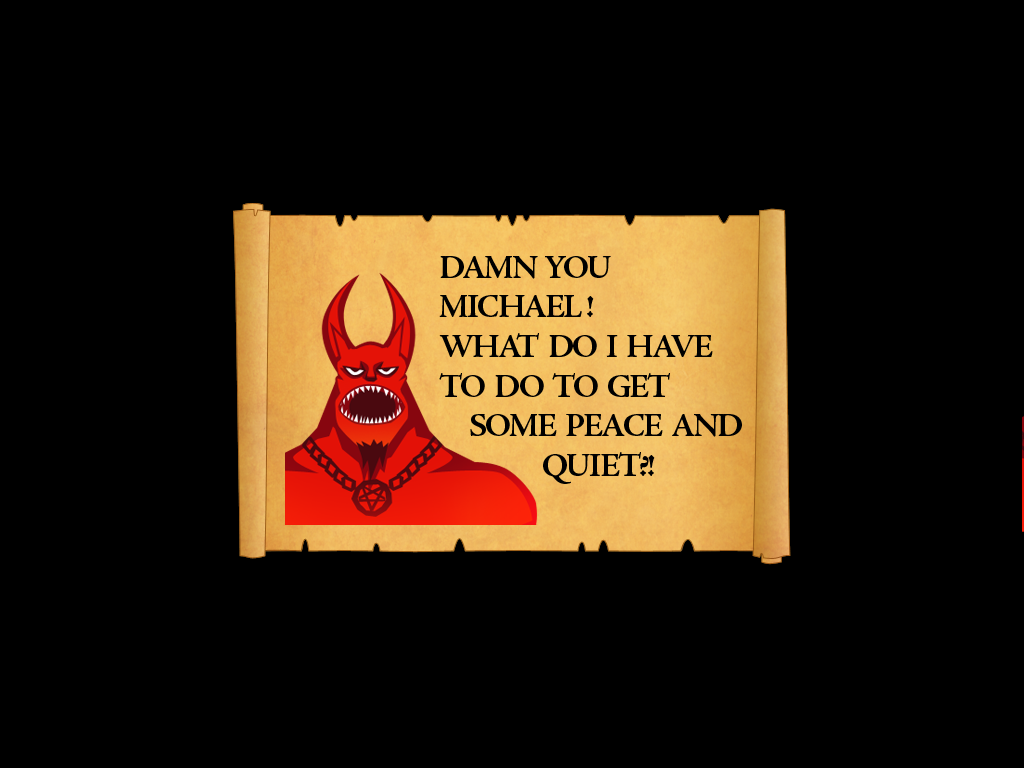
<style>
.page{position:relative;width:1024px;height:768px;background:#000000}
.page>*{position:absolute;margin:0}
.t1{font:33px "AJensonPro-Bold";letter-spacing:-0.06em;color:#000000}
</style>
<div class="page">
<p class="t1" style="left:439px;top:256px;width:303px;height:228px">DAMN  YOU MICHAEL !<br>WHAT  DO  I  HAVE TO  DO  TO  GET<br>      SOME  PEACE  AND<br>                     QUIET?!</p>
</div>
